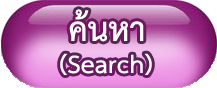
<style>
.page{position:relative;width:217px;height:88px}
.page>*{position:absolute;margin:0}
.t1{font:48px "THSarabunPSK-Bold";color:#ffffff}
.t2{font:36px "THSarabunPSK-Bold";color:#ffffff}
</style>
<div class="page">
<p class="t1" style="left:69px;top:9px;width:75px;height:33px">ค้นหา</p>
<p class="t2" style="left:60px;top:53px;width:92px;height:22px">(Search)</p>
</div>
